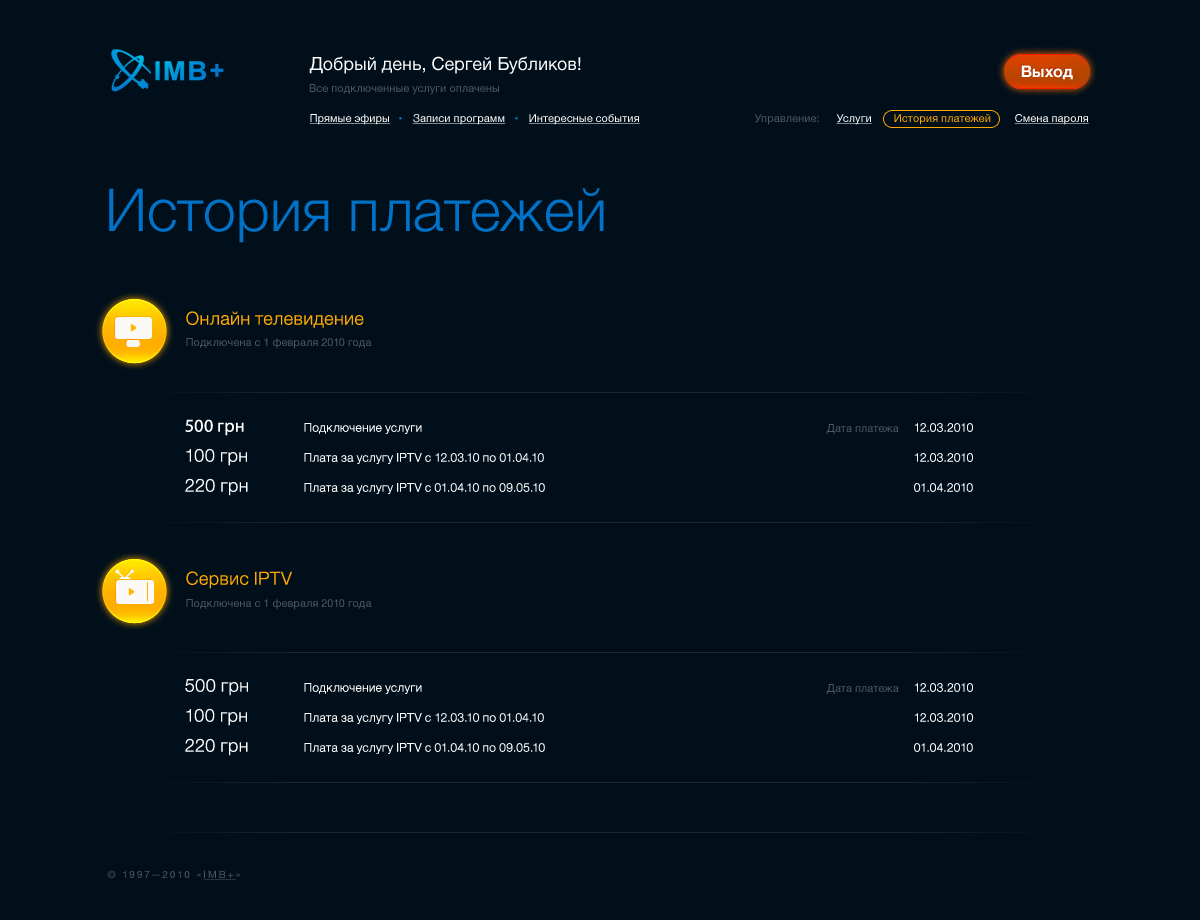
<style>
.page{position:relative;width:1200px;height:920px;background:#000f1a}
.page>*{position:absolute;margin:0}
.t1{font:18px "HelveticaNeue";color:#ffffff}
.t2{font:16px "HelveticaNeue-Bold";color:#ffffff}
.t3{font:11px "HelveticaNeue";color:#4d575f}
.t4{font:11px "HelveticaNeue";color:#ffffff;text-decoration:underline}
.t5{font:11px "HelveticaNeue";color:#ffa800}
.t6{font:59px "HelveticaNeue-Light";color:#0073c9}
.t7{font:18px "HelveticaNeue-Light";color:#ffa800}
.t8{font:18px "MyriadPro-Regular";color:#ffffff}
.t9{font:12px "HelveticaNeue-Light";color:#ffffff}
.t10{font:18px "HelveticaNeue-Light";color:#ffffff}
.t11{font:10px "HelveticaNeue";letter-spacing:0.2em;color:#4d575f;text-transform:uppercase}
.t12{font:10px "HelveticaNeue";letter-spacing:0.2em;color:#4d575f;text-transform:uppercase;text-decoration:underline}
</style>
<div class="page">
<p class="t1" style="left:309px;top:56px;width:272px;height:18px">Добрый день, Сергей Бубликов!</p>
<p class="t2" style="left:1021px;top:65px;width:52px;height:15px">Выход</p>
<p class="t3" style="left:309px;top:84px;width:190px;height:11px">Все подключенные услуги оплачены</p>
<p class="t4" style="left:309px;top:114px;width:81px;height:11px">Прямые эфиры</p>
<p class="t4" style="left:412px;top:114px;width:94px;height:11px">Записи программ</p>
<p class="t4" style="left:528px;top:114px;width:112px;height:11px">Интересные события</p>
<p class="t3" style="left:754px;top:114px;width:65px;height:11px">Управление:</p>
<p class="t4" style="left:836px;top:114px;width:36px;height:11px">Услуги</p>
<p class="t5" style="left:894px;top:114px;width:97px;height:11px">История платежей</p>
<p class="t4" style="left:1014px;top:114px;width:75px;height:11px">Смена пароля</p>
<p class="t6" style="left:109px;top:188px;width:495px;height:55px">История платежей</p>
<p class="t7" style="left:186px;top:311px;width:178px;height:17px">Онлайн телевидение</p>
<p class="t3" style="left:186px;top:338px;width:186px;height:11px">Подключена с 1 февраля 2010 года</p>
<p class="t8" style="left:185px;top:419px;width:59px;height:17px">500 грн</p>
<p class="t9" style="left:304px;top:423px;width:118px;height:11px">Подключение услуги</p>
<p class="t3" style="left:826px;top:424px;width:73px;height:10px">Дата платежа</p>
<p class="t9" style="left:914px;top:423px;width:59px;height:9px">12.03.2010</p>
<p class="t10" style="left:186px;top:448px;width:61px;height:18px">100 грн</p>
<p class="t9" style="left:304px;top:453px;width:240px;height:11px">Плата за услугу IPTV с 12.03.10 по 01.04.10</p>
<p class="t9" style="left:914px;top:453px;width:59px;height:9px">12.03.2010</p>
<p class="t10" style="left:185px;top:478px;width:63px;height:18px">220 грн</p>
<p class="t9" style="left:304px;top:483px;width:241px;height:11px">Плата за услугу IPTV с 01.04.10 по 09.05.10</p>
<p class="t9" style="left:914px;top:483px;width:59px;height:9px">01.04.2010</p>
<p class="t7" style="left:186px;top:571px;width:106px;height:18px">Сервис IPTV</p>
<p class="t3" style="left:186px;top:599px;width:186px;height:11px">Подключена с 1 февраля 2010 года</p>
<p class="t10" style="left:185px;top:678px;width:63px;height:18px">500 грн</p>
<p class="t9" style="left:304px;top:683px;width:118px;height:11px">Подключение услуги</p>
<p class="t3" style="left:826px;top:684px;width:73px;height:10px">Дата платежа</p>
<p class="t9" style="left:914px;top:683px;width:59px;height:9px">12.03.2010</p>
<p class="t10" style="left:186px;top:708px;width:61px;height:18px">100 грн</p>
<p class="t9" style="left:304px;top:713px;width:240px;height:11px">Плата за услугу IPTV с 12.03.10 по 01.04.10</p>
<p class="t9" style="left:914px;top:713px;width:59px;height:9px">12.03.2010</p>
<p class="t10" style="left:185px;top:738px;width:63px;height:18px">220 грн</p>
<p class="t9" style="left:304px;top:743px;width:241px;height:11px">Плата за услугу IPTV с 01.04.10 по 09.05.10</p>
<p class="t9" style="left:914px;top:743px;width:59px;height:9px">01.04.2010</p>
<p class="t11" style="left:107px;top:870px;width:133px;height:10px">© 1997—2010 «<span class="t12">IMB+</span>»</p>
</div>
